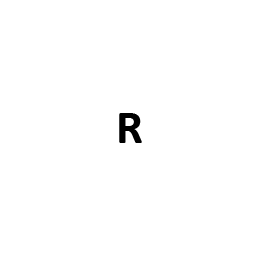
<style>
.page{position:relative;width:256px;height:256px;background:#ffffff}
.page>*{position:absolute;margin:0}
.t1{font:48px "Calibri-Bold";color:#000000}
</style>
<div class="page">
<p class="t1" style="left:119px;top:113px;width:23px;height:30px">R</p>
</div>
